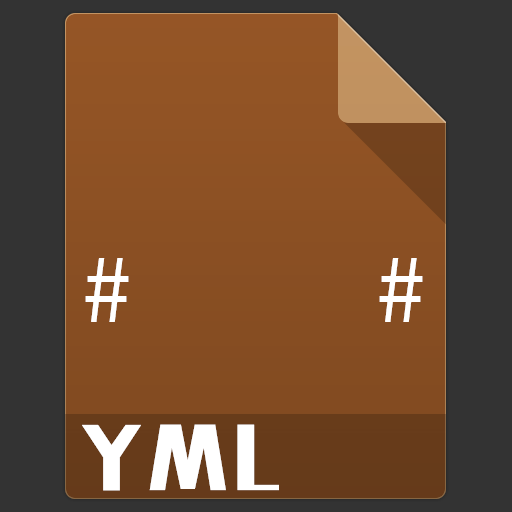
<style>
.page{position:relative;width:512px;height:512px;background:#333333}
.page>*{position:absolute;margin:0}
.t1{font:99px "SourceCodeProYaHeiHybrid";letter-spacing:0.07em;color:#ffffff}
.t2{font:72px "MFLiHei_Noncommercial-Regular";letter-spacing:0.07em;color:#ffffff}
</style>
<div class="page">
<p class="t1" style="left:85px;top:258px;width:338px;height:64px">#    #</p>
<p class="t2" style="left:82px;top:424px;width:197px;height:67px">YML</p>
</div>
